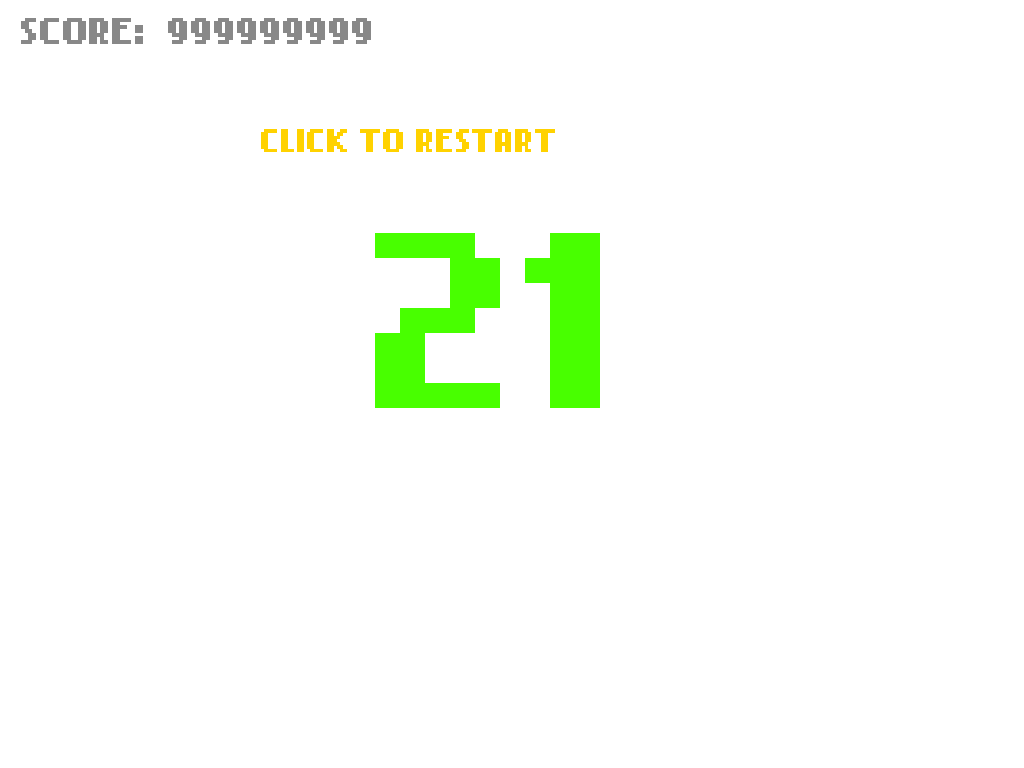
<style>
.page{position:relative;width:1024px;height:768px;background:#ffffff}
.page>*{position:absolute;margin:0}
.t1{font:30px "NokiaCellphoneFC-Small";color:#888888;text-transform:uppercase}
.t2{font:26px "NokiaCellphoneFC-Small";color:#ffd200;text-transform:uppercase}
.t3{font:200px "NokiaCellphoneFC-Small";color:#48ff00;text-transform:uppercase}
</style>
<div class="page">
<p class="t1" style="left:21px;top:18px;width:350px;height:26px">SCORE:  999999999</p>
<p class="t2" style="left:261px;top:129px;width:294px;height:23px">CLICK TO RESTART</p>
<p class="t3" style="left:375px;top:233px;width:225px;height:175px">21</p>
</div>
